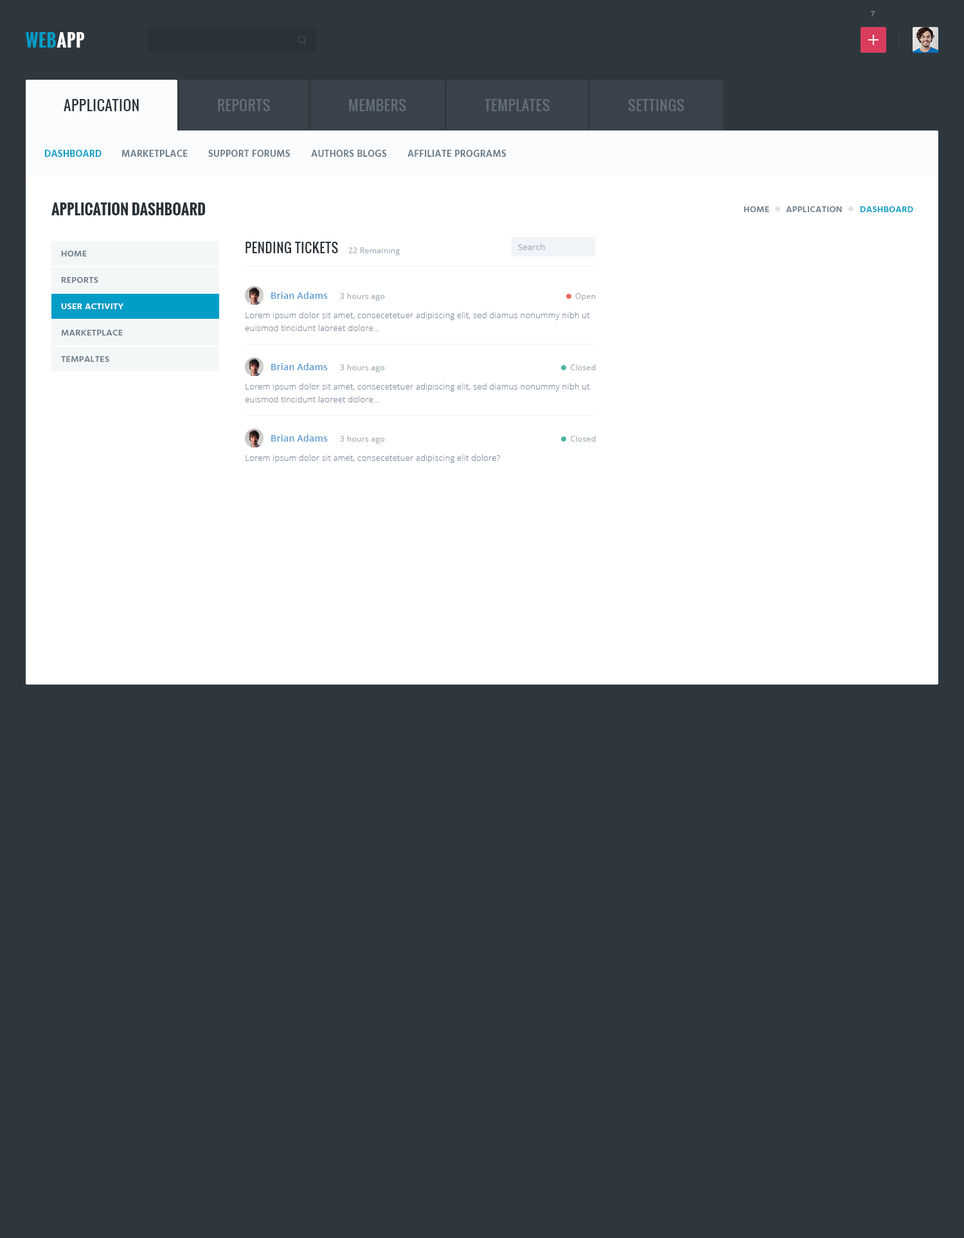
<style>
.page{position:relative;width:964px;height:1238px;background:#2f373e}
.page>*{position:absolute;margin:0}
.t1{font:8.4px "Hind-Semibold";letter-spacing:0.02em;color:#6f7e8b;text-transform:uppercase}
.t2{font:17.4px "Oswald-Bold";letter-spacing:0.03em;color:#009dc7;text-transform:uppercase}
.t3{font:17.4px "Oswald-Bold";letter-spacing:0.03em;color:#ffffff;text-transform:uppercase}
.t4{font:14.1px "Oswald-Regular";letter-spacing:0.03em;color:#2a3239;text-transform:uppercase}
.t5{font:14.1px "Oswald-Regular";letter-spacing:0.03em;color:#636e77;text-transform:uppercase}
.t6{font:9.6px "Hind-Semibold";letter-spacing:0.02em;color:#009dc7;text-transform:uppercase}
.t7{font:9.6px "Hind-Semibold";letter-spacing:0.02em;color:#6c7b88;text-transform:uppercase}
.t8{font:14.8px "Oswald-Bold";color:#2a3239;text-transform:uppercase}
.t9{font:9px "Hind-Semibold";letter-spacing:0.02em;color:#6c7b88;text-transform:uppercase}
.t10{font:9px "Hind-Semibold";letter-spacing:0.02em;color:#009dc7;text-transform:uppercase}
.t11{font:12.9px "Oswald-Regular";letter-spacing:0.03em;color:#2a3239}
.t12{font:8.4px "OpenSans";letter-spacing:0.02em;color:#9eacb4}
.t13{font:7.7px "OpenSans";letter-spacing:0.03em;color:#9eacb4}
.t14{font:9px "OpenSans-Semibold";letter-spacing:0.02em;color:#5b9bd1}
.t15{font:9px "Hind-Semibold";letter-spacing:0.02em;color:#ffffff;text-transform:uppercase}
.t16{font:8.4px/12.9px "OpenSans-Light";letter-spacing:0.02em;color:#7e8c9e}
.t17{font:8.4px "OpenSans-Light";letter-spacing:0.02em;color:#7e8c9e}
</style>
<div class="page">
<p class="t1" style="left:871px;top:11px;width:4px;height:6px">7</p>
<p class="t2" style="left:26px;top:32px;width:59px;height:16px">Web<span class="t3">App</span></p>
<p class="t4" style="left:64px;top:99px;width:75px;height:12px">APPLICATION</p>
<p class="t5" style="left:218px;top:99px;width:52px;height:12px">REPORTS</p>
<p class="t5" style="left:349px;top:99px;width:57px;height:12px">MEMBERS</p>
<p class="t5" style="left:485px;top:99px;width:65px;height:12px">TEMPLATES</p>
<p class="t5" style="left:628px;top:99px;width:57px;height:12px">SETTINGS</p>
<p class="t6" style="left:44px;top:150px;width:58px;height:7px">DASHBOARD</p>
<p class="t7" style="left:122px;top:150px;width:66px;height:7px">MARKETPLACE</p>
<p class="t7" style="left:208px;top:150px;width:82px;height:7px">SUPPORT FORUMS</p>
<p class="t7" style="left:311px;top:150px;width:76px;height:7px">AUTHORS BLOGS</p>
<p class="t7" style="left:408px;top:150px;width:99px;height:7px">affiliate programs</p>
<p class="t8" style="left:51px;top:203px;width:155px;height:12px">Application Dashboard</p>
<p class="t9" style="left:744px;top:206px;width:26px;height:6px">HOME</p>
<p class="t9" style="left:786px;top:206px;width:56px;height:6px">APPLICATION</p>
<p class="t10" style="left:860px;top:206px;width:54px;height:6px">DASHBOARD</p>
<p class="t11" style="left:246px;top:242px;width:92px;height:11px">PENDING TICKETS</p>
<p class="t12" style="left:518px;top:244px;width:27px;height:6px">Search</p>
<p class="t9" style="left:61px;top:251px;width:26px;height:5px">HOME</p>
<p class="t13" style="left:348px;top:248px;width:52px;height:7px">22 Remaining</p>
<p class="t9" style="left:61px;top:277px;width:37px;height:6px">REPORTS</p>
<p class="t14" style="left:271px;top:292px;width:57px;height:7px">Brian Adams</p>
<p class="t13" style="left:340px;top:293px;width:45px;height:8px">3 hours ago</p>
<p class="t13" style="left:575px;top:293px;width:21px;height:8px">Open</p>
<p class="t15" style="left:61px;top:303px;width:62px;height:6px">USER ACTIVITY</p>
<p class="t16" style="left:245px;top:312px;width:345px;height:19px">Lorem ipsum dolor sit amet, consecetetuer adipiscing elit, sed diamus nonummy nibh ut euismod tincidunt laoreet dolore...</p>
<p class="t9" style="left:61px;top:330px;width:62px;height:6px">MARKETPLACE</p>
<p class="t9" style="left:61px;top:356px;width:48px;height:6px">TEMPALTES</p>
<p class="t14" style="left:271px;top:363px;width:57px;height:7px">Brian Adams</p>
<p class="t13" style="left:340px;top:364px;width:45px;height:8px">3 hours ago</p>
<p class="t13" style="left:571px;top:364px;width:25px;height:6px">Closed</p>
<p class="t16" style="left:245px;top:383px;width:345px;height:19px">Lorem ipsum dolor sit amet, consecetetuer adipiscing elit, sed diamus nonummy nibh ut euismod tincidunt laoreet dolore...</p>
<p class="t14" style="left:271px;top:435px;width:57px;height:7px">Brian Adams</p>
<p class="t13" style="left:340px;top:436px;width:45px;height:8px">3 hours ago</p>
<p class="t13" style="left:571px;top:436px;width:25px;height:6px">Closed</p>
<p class="t17" style="left:246px;top:455px;width:254px;height:8px">Lorem ipsum dolor sit amet, consecetetuer adipiscing elit dolore?</p>
</div>
